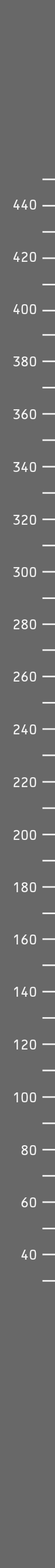
<style>
.page{position:relative;width:55px;height:1568px;background:#686868}
.page>*{position:absolute;margin:0}
.t1{font:13.1px "OCRBStd";letter-spacing:-0.09em;color:#f3f3f3}
</style>
<div class="page">
<p class="t1" style="left:14px;top:200px;width:23px;height:10px">440</p>
<p class="t1" style="left:14px;top:252px;width:23px;height:10px">420</p>
<p class="t1" style="left:14px;top:304px;width:23px;height:10px">400</p>
<p class="t1" style="left:14px;top:356px;width:23px;height:10px">380</p>
<p class="t1" style="left:14px;top:409px;width:23px;height:10px">3600</p>
<p class="t1" style="left:14px;top:462px;width:23px;height:10px">340</p>
<p class="t1" style="left:14px;top:515px;width:23px;height:10px">320</p>
<p class="t1" style="left:14px;top:567px;width:23px;height:10px">300</p>
<p class="t1" style="left:14px;top:619px;width:23px;height:10px">280</p>
<p class="t1" style="left:14px;top:672px;width:23px;height:10px">260</p>
<p class="t1" style="left:14px;top:724px;width:23px;height:10px">240</p>
<p class="t1" style="left:14px;top:777px;width:23px;height:10px">220</p>
<p class="t1" style="left:14px;top:830px;width:23px;height:10px">2000</p>
<p class="t1" style="left:14px;top:882px;width:23px;height:10px">180</p>
<p class="t1" style="left:14px;top:935px;width:23px;height:9px">160</p>
<p class="t1" style="left:14px;top:987px;width:23px;height:10px">140</p>
<p class="t1" style="left:14px;top:1040px;width:23px;height:10px">120</p>
<p class="t1" style="left:14px;top:1092px;width:23px;height:10px">100</p>
<p class="t1" style="left:21px;top:1145px;width:16px;height:10px">80</p>
<p class="t1" style="left:21px;top:1197px;width:16px;height:10px">60</p>
<p class="t1" style="left:21px;top:1250px;width:16px;height:10px">40</p>
</div>
